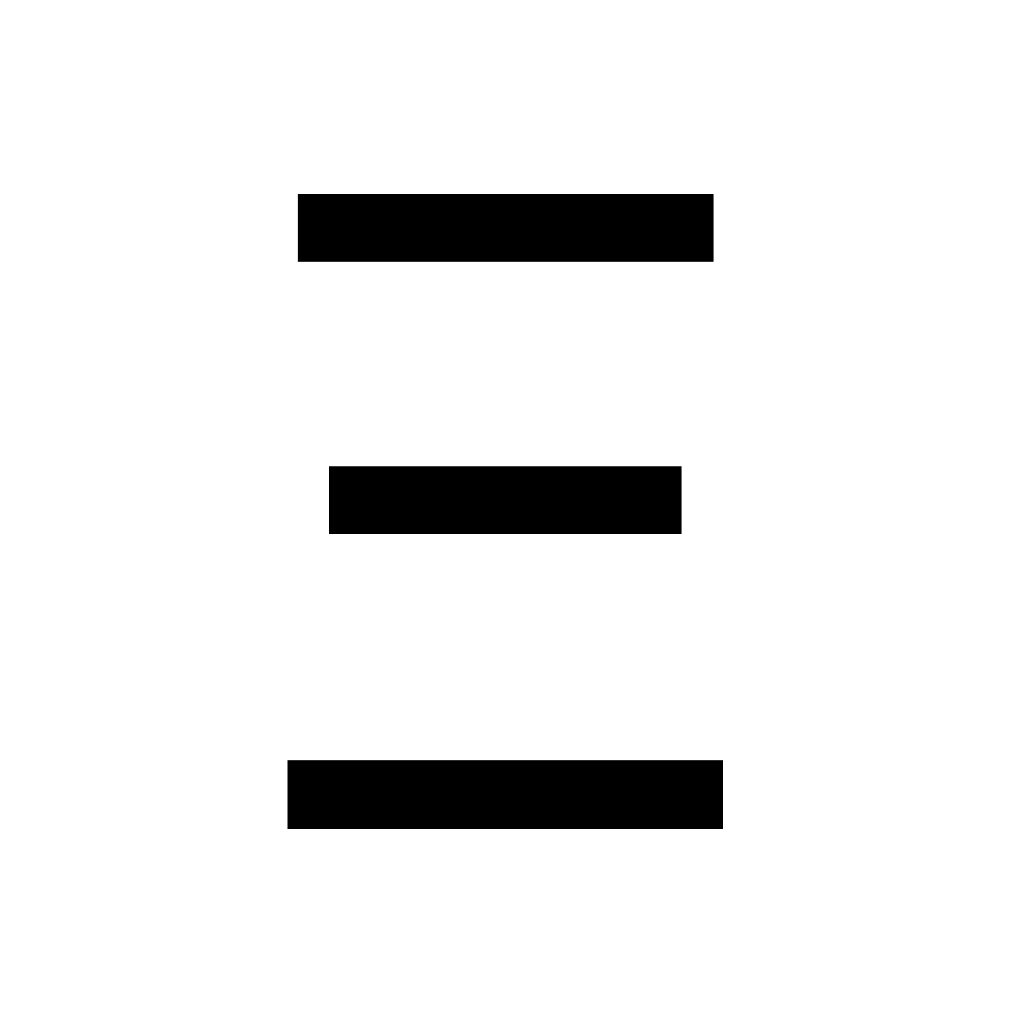
<style>
.page{position:relative;width:1024px;height:1024px;background:#ffffff}
.page>*{position:absolute;margin:0}
.t1{font:942.4px "MyriadPro-Regular";color:#000000}
</style>
<div class="page">
<p class="t1" style="left:287px;top:194px;width:436px;height:635px">Ξ</p>
</div>
